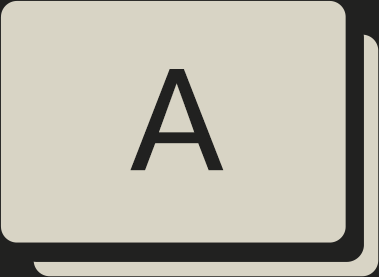
<style>
.page{position:relative;width:379px;height:277px;background:#d8d4c5}
.page>*{position:absolute;margin:0}
.t1{font:141.8px "Muli";letter-spacing:0.05em;color:#212120}
</style>
<div class="page">
<p class="t1" style="left:130px;top:69px;width:94px;height:102px">A</p>
</div>
